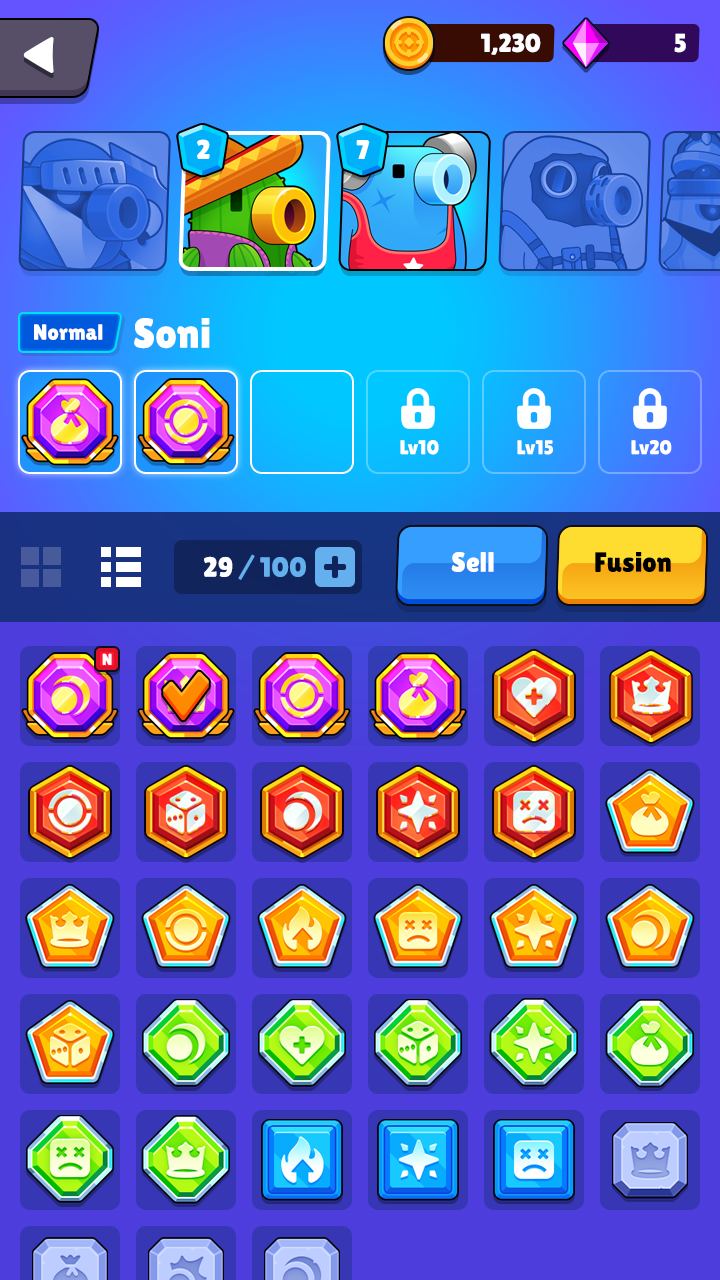
<style>
.page{position:relative;width:720px;height:1280px}
.page>*{position:absolute;margin:0}
.t1{font:26px "LilitaOne";letter-spacing:-0.01em;color:#ffffff;text-transform:uppercase}
.t2{font:27.2px "LilitaOne";color:#ffffff;text-transform:uppercase}
.t3{font:42px "LilitaOne";color:#ffffff}
.t4{font:22px "LilitaOne";color:#ffffff}
.t5{font:20px "LilitaOne";color:#ffffff}
.t6{font:28px "LilitaOne";color:#64b0ef}
.t7{font:28px "LilitaOne";color:#ffffff}
.t8{font:28px "LilitaOne";color:#000000}
.t9{font:16px "LilitaOne";color:#ffffff;text-transform:uppercase}
</style>
<div class="page">
<p class="t1" style="left:481px;top:33px;width:60px;height:22px">1,230</p>
<p class="t1" style="left:674px;top:33px;width:12px;height:20px">5</p>
<p class="t2" style="left:197px;top:139px;width:13px;height:20px">2</p>
<p class="t2" style="left:356px;top:140px;width:14px;height:19px">7</p>
<p class="t3" style="left:134px;top:318px;width:76px;height:31px">Soni</p>
<p class="t4" style="left:34px;top:324px;width:69px;height:16px">Normal</p>
<p class="t5" style="left:400px;top:440px;width:39px;height:15px">Lv10</p>
<p class="t5" style="left:517px;top:440px;width:36px;height:15px">Lv15</p>
<p class="t5" style="left:631px;top:440px;width:41px;height:15px">Lv20</p>
<p class="t6" style="left:204px;top:554px;width:102px;height:26px"><span class="t7">29 </span>/ 100</p>
<p class="t7" style="left:451px;top:552px;width:43px;height:20px">Sell</p>
<p class="t8" style="left:595px;top:552px;width:76px;height:20px">Fusion</p>
<p class="t9" style="left:102px;top:653px;width:10px;height:12px">N</p>
</div>
